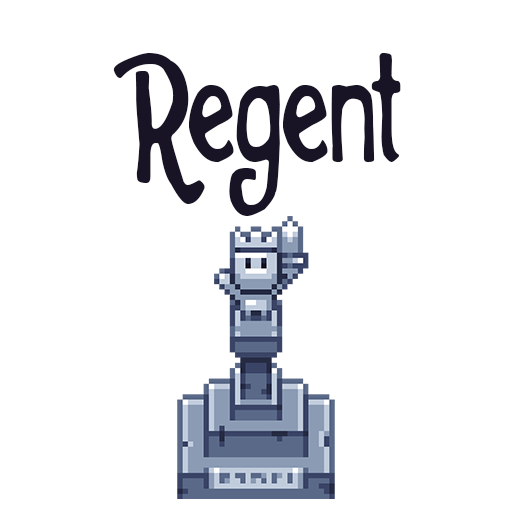
<style>
.page{position:relative;width:512px;height:512px;background:#ffffff}
.page>*{position:absolute;margin:0}
.t1{font:170px "BackToTheFantasy";color:#181425}
</style>
<div class="page">
<p class="t1" style="left:113px;top:53px;width:288px;height:163px">Regent</p>
</div>
